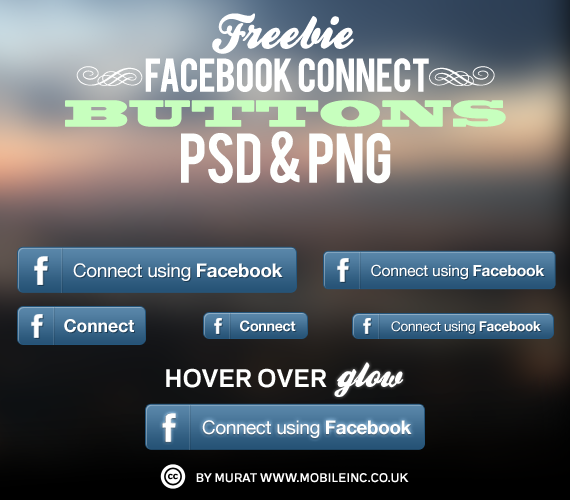
<style>
.page{position:relative;width:570px;height:500px}
.page>*{position:absolute;margin:0}
.t1{font:36.9px/43px "Bebas";color:#ffffff}
.t2{font:49.9px/45px "BallparkWeiner";color:#ffffff}
.t3{font:45px/43px "Nymphette";color:#ffffff}
.t4{font:34.9px/35px "BlackoakStd";color:#c7ffbe;text-transform:uppercase}
.t5{font:54.9px/56px "Bebas";color:#fefffe;text-transform:uppercase}
.t6{font:18.7px "HelveticaNeueLT-Roman";letter-spacing:-0.015em;color:#ffffff}
.t7{font:18.7px "HelveticaNeueLT-Bold";letter-spacing:-0.015em;color:#ffffff}
.t8{font:15.6px "HelveticaNeueLT-Roman";letter-spacing:-0.015em;color:#ffffff}
.t9{font:15.6px "HelveticaNeueLT-Bold";letter-spacing:-0.015em;color:#ffffff}
.t10{font:17.9px "HelveticaNeueLT-Bold";letter-spacing:-0.015em;color:#ffffff}
.t11{font:14.1px "HelveticaNeueLT-Bold";letter-spacing:-0.015em;color:#ffffff}
.t12{font:13.4px "HelveticaNeueLT-Roman";letter-spacing:-0.015em;color:#ffffff}
.t13{font:13.4px "HelveticaNeueLT-Bold";letter-spacing:-0.015em;color:#ffffff}
.t14{font:38px "BallparkWeiner";letter-spacing:-0.015em;color:#ffffff}
.t15{font:25.1px "EmbarcaderoMVB-Bold";letter-spacing:-0.015em;color:#fefffe;text-transform:uppercase}
.t16{font:12.3px "EmbarcaderoMVB-Bold";letter-spacing:-0.015em;color:#ffffff;text-transform:uppercase}
</style>
<div class="page">
<p class="t1" style="left:65px;top:13px;width:441px;height:171px;text-align:center"><span class="t2">Freebie <br></span><span class="t3">e</span>Facebook Connect<span class="t3">f<br></span><span class="t4">Buttons<br></span><span class="t5">PSD &amp; PNG</span></p>
<p class="t6" style="left:73px;top:263px;width:210px;height:18px">Connect using <span class="t7">Facebook</span></p>
<p class="t8" style="left:371px;top:264px;width:174px;height:16px">Connect using <span class="t9">Facebook</span></p>
<p class="t10" style="left:64px;top:319px;width:70px;height:14px">Connect</p>
<p class="t11" style="left:240px;top:320px;width:56px;height:12px">Connect</p>
<p class="t12" style="left:391px;top:321px;width:150px;height:13px">Connect using <span class="t13">Facebook</span></p>
<p class="t14" style="left:334px;top:362px;width:70px;height:35px">glow</p>
<p class="t15" style="left:166px;top:368px;width:161px;height:20px">Hover over</p>
<p class="t6" style="left:202px;top:420px;width:210px;height:18px">Connect using <span class="t7">Facebook</span></p>
<p class="t16" style="left:196px;top:473px;width:213px;height:10px">By Murat www.mobileinc.co.uk</p>
</div>
